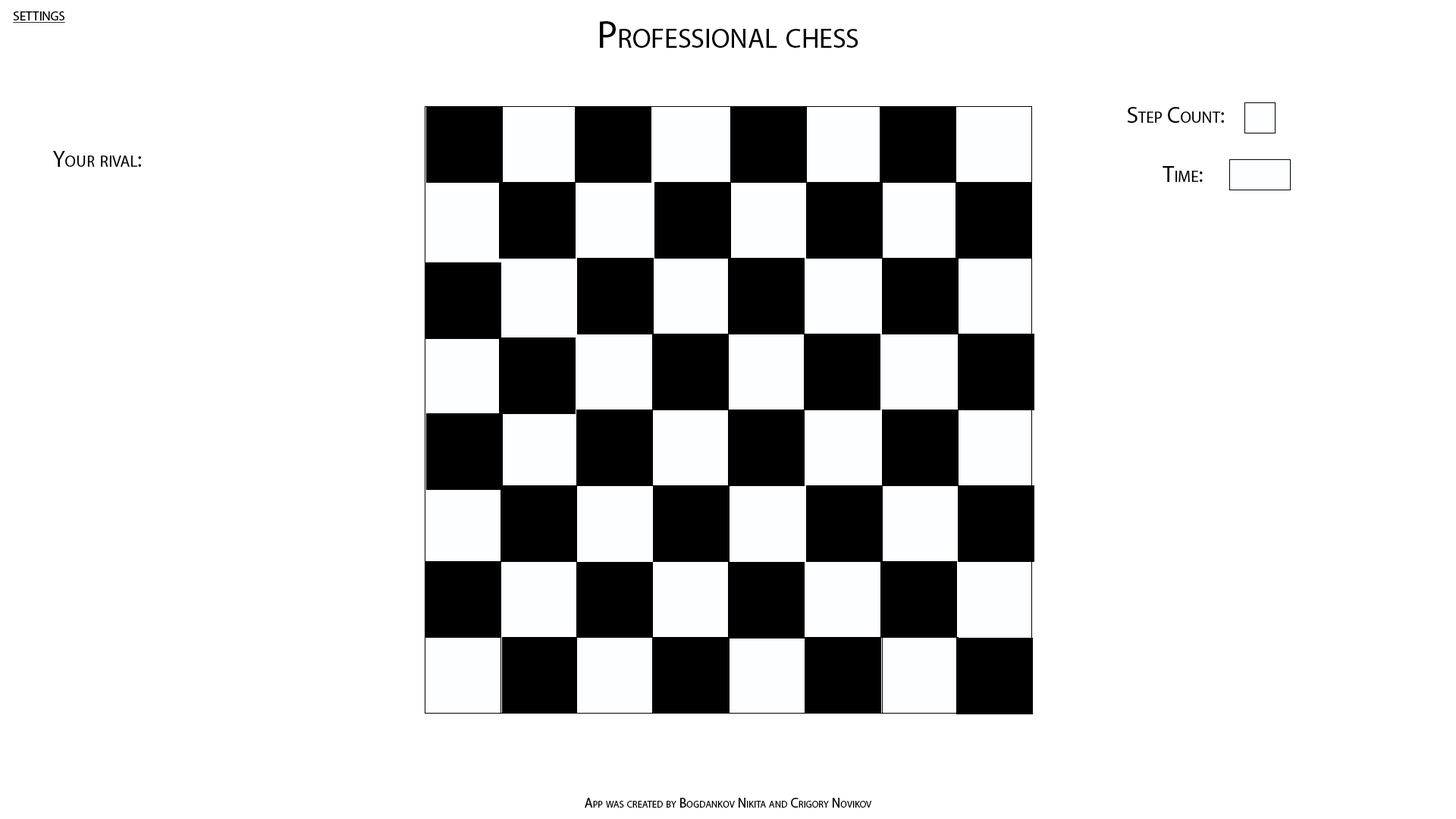
<style>
.page{position:relative;width:1456px;height:819px;background:#ffffff}
.page>*{position:absolute;margin:0}
.t1{font:18.2px "MyriadPro-Regular";color:#000000;font-variant:small-caps;text-decoration:underline}
.t2{font:38.9px "MyriadPro-Regular";color:#000000;font-variant:small-caps}
.t3{font:22.7px "MyriadPro-Regular";color:#000000;font-variant:small-caps}
.t4{font:13.6px "MyriadPro-Regular";color:#000000;font-variant:small-caps}
</style>
<div class="page">
<p class="t1" style="left:13px;top:11px;width:52px;height:12px">settings</p>
<p class="t2" style="left:600px;top:21px;width:258px;height:27px">Professional chess</p>
<p class="t3" style="left:1127px;top:107px;width:97px;height:16px">Step Count:</p>
<p class="t3" style="left:53px;top:151px;width:88px;height:16px">Your rival:</p>
<p class="t3" style="left:1163px;top:166px;width:40px;height:16px">Time:</p>
<p class="t4" style="left:585px;top:798px;width:287px;height:10px">App was created by Bogdankov Nikita and Crigory Novikov</p>
</div>
